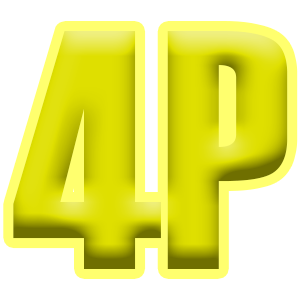
<style>
.page{position:relative;width:300px;height:300px;background:#ffffff}
.page>*{position:absolute;margin:0}
.t1{font:340.3px "Haettenschweiler";color:#dfdf00}
</style>
<div class="page">
<p class="t1" style="left:13px;top:31px;width:275px;height:238px">4P</p>
</div>
